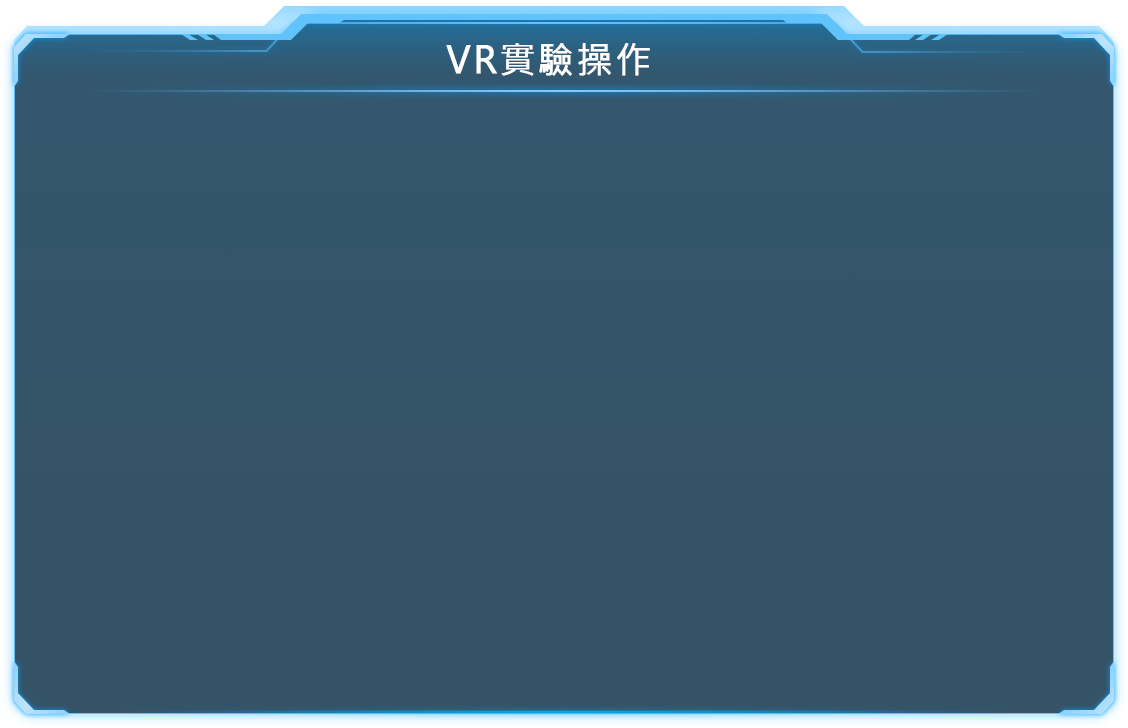
<style>
.page{position:relative;width:1128px;height:728px}
.page>*{position:absolute;margin:0}
.t1{font:36px "MicrosoftJhengHeiRegular";letter-spacing:0.05em;color:#ffffff;font-weight:bold}
</style>
<div class="page">
<p class="t1" style="left:446px;top:43px;width:204px;height:33px">VR實驗操作</p>
</div>
